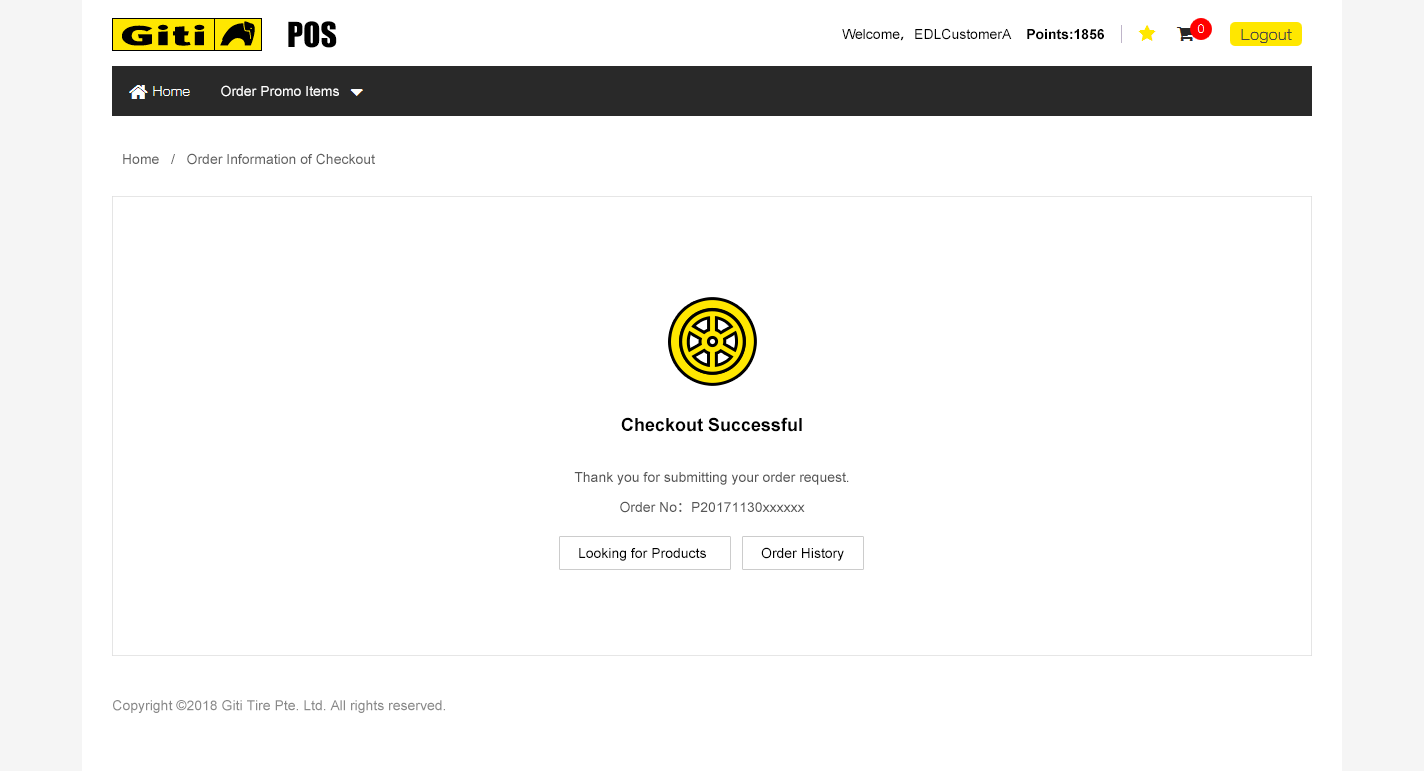
<style>
.page{position:relative;width:1424px;height:771px;background:#ffffff}
.page>*{position:absolute;margin:0}
.t1{font:32px "Impact";color:#000000}
.t2{font:14px "ArialMT";color:#000000}
.t3{font:14px "AdobeHeitiStd-Regular";color:#000000}
.t4{font:14px "Arial-BoldMT";color:#000000}
.t5{font:14px "ArialMT";color:#ffffff}
.t6{font:14px "ArialMT";color:#626262}
.t7{font:18px "Arial-BoldMT";color:#000000}
.t8{font:14px/30px "ArialMT";color:#565656}
.t9{font:14px/30px "AdobeHeitiStd-Regular";color:#565656}
.t10{font:14px "ArialMT";color:#898989}
</style>
<div class="page">
<p class="t1" style="left:288px;top:21px;width:49px;height:27px">POS</p>
<p class="t2" style="left:842px;top:28px;width:262px;height:13px">Welcome<span class="t3">，</span>EDLCustomerA    <span class="t4">Points:1856</span></p>
<p class="t5" style="left:221px;top:85px;width:118px;height:12px">Order Promo Items</p>
<p class="t6" style="left:123px;top:153px;width:252px;height:12px">Home   /   Order Information of Checkout</p>
<p class="t7" style="left:621px;top:417px;width:181px;height:15px">Checkout Successful</p>
<p class="t8" style="left:574px;top:472px;width:275px;height:41px;text-align:center">Thank you for submitting your order request.<br>Order No<span class="t9">：</span>P20171130xxxxxx</p>
<p class="t2" style="left:579px;top:548px;width:127px;height:13px">Looking for Products</p>
<p class="t2" style="left:761px;top:547px;width:83px;height:14px">Order History</p>
<p class="t10" style="left:113px;top:700px;width:332px;height:13px">Copyright ©2018 Giti Tire Pte. Ltd. All rights reserved.</p>
</div>
